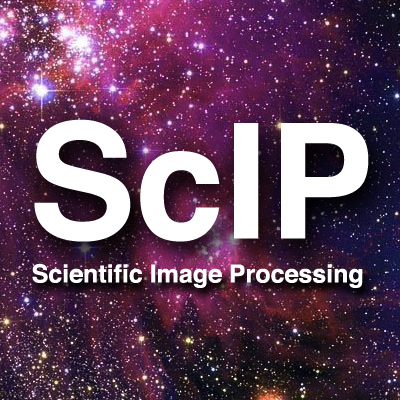
<style>
.page{position:relative;width:400px;height:400px}
.page>*{position:absolute;margin:0}
.t1{font:160.2px "Helvetica-Bold";color:#ffffff}
.t2{font:25px "Helvetica-Bold";color:#ffffff}
</style>
<div class="page">
<p class="t1" style="left:34px;top:119px;width:335px;height:123px">ScIP</p>
<p class="t2" style="left:32px;top:263px;width:331px;height:25px">Scientific Image Processing</p>
</div>
